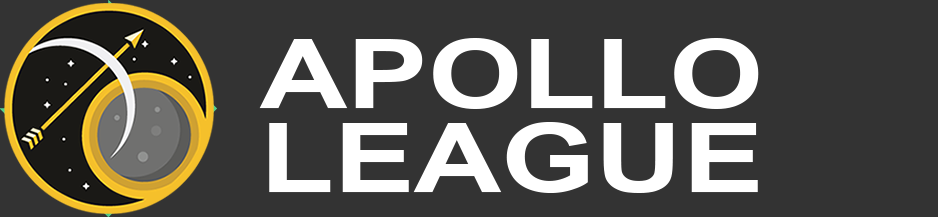
<style>
.page{position:relative;width:938px;height:217px;background:#333333}
.page>*{position:absolute;margin:0}
.t1{font:95.8px/83.3px "Arial-BoldMT";color:#ffffff;scale:1.26 1}
</style>
<div class="page">
<p class="t1" style="left:259px;top:38px;width:500px;height:155px">APOLLO <br>LEAGUE</p>
</div>
